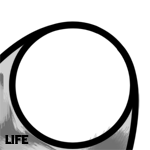
<style>
.page{position:relative;width:150px;height:150px;background:#ffffff}
.page>*{position:absolute;margin:0}
.t1{font:10.8px "EvilDead";letter-spacing:-0.001em;color:#000000;scale:1.11 1}
</style>
<div class="page">
<p class="t1" style="left:5px;top:135px;width:24px;height:9px">LIFE</p>
</div>
